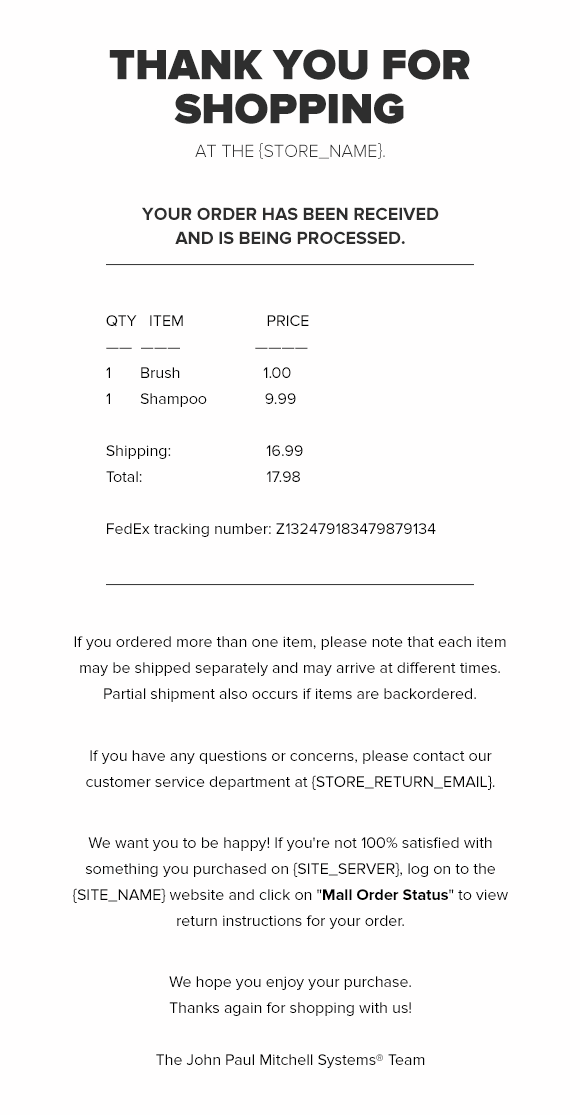
<style>
.page{position:relative;width:580px;height:1115px;background:#fffefe}
.page>*{position:absolute;margin:0}
.t1{font:44px/44px "ProximaNova-Black";color:#2e2e2e;text-transform:uppercase}
.t2{font:18px "ProximaNova-Light";color:#2e2e2e;text-transform:uppercase}
.t3{font:18px/24px "ProximaNova-Bold";color:#2e2e2e;text-transform:uppercase}
.t4{font:16px/26px "ProximaNova-Regular";color:#000000}
.t5{font:16px/26px "ProximaNova-Bold";color:#000000}
</style>
<div class="page">
<p class="t1" style="left:109px;top:49px;width:361px;height:75px;text-align:center">Thank you for shopping</p>
<p class="t2" style="left:195px;top:143px;width:190px;height:16px">at the {STORE_NAME}.</p>
<p class="t3" style="left:142px;top:207px;width:297px;height:37px;text-align:center">Your order has been received and is being processed.</p>
<p class="t4" style="left:106px;top:315px;width:330px;height:222px">QTY   ITEM                    PRICE <br>——  ———                  ———— <br>1       Brush                    1.00<br>1       Shampoo              9.99<br><br>Shipping:                       16.99<br>Total:                              17.98<br><br>FedEx tracking number: Z132479183479879134</p>
<p class="t4" style="left:74px;top:636px;width:432px;height:66px;text-align:center">If you ordered more than one item, please note that each item may be shipped separately and may arrive at different times. Partial shipment also occurs if items are backordered.</p>
<p class="t4" style="left:86px;top:750px;width:409px;height:40px;text-align:center">If you have any questions or concerns, please contact our customer service department at {STORE_RETURN_EMAIL}.</p>
<p class="t4" style="left:73px;top:837px;width:435px;height:92px;text-align:center">We want you to be happy! If you're not 100% satisfied with something you purchased on {SITE_SERVER}, log on to the {SITE_NAME} website and click on "<span class="t5">Mall Order Status</span>" to view return instructions for your order.</p>
<p class="t4" style="left:156px;top:976px;width:269px;height:92px;text-align:center">We hope you enjoy your purchase.<br>Thanks again for shopping with us!<br><br>The John Paul Mitchell Systems® Team</p>
</div>
